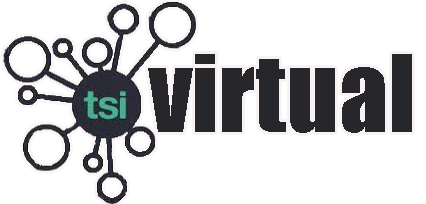
<style>
.page{position:relative;width:426px;height:204px;background:#ffffff}
.page>*{position:absolute;margin:0}
.t1{font:99.4px "Impact";color:#27262b}
</style>
<div class="page">
<p class="t1" style="left:148px;top:54px;width:264px;height:79px">virtual</p>
</div>
